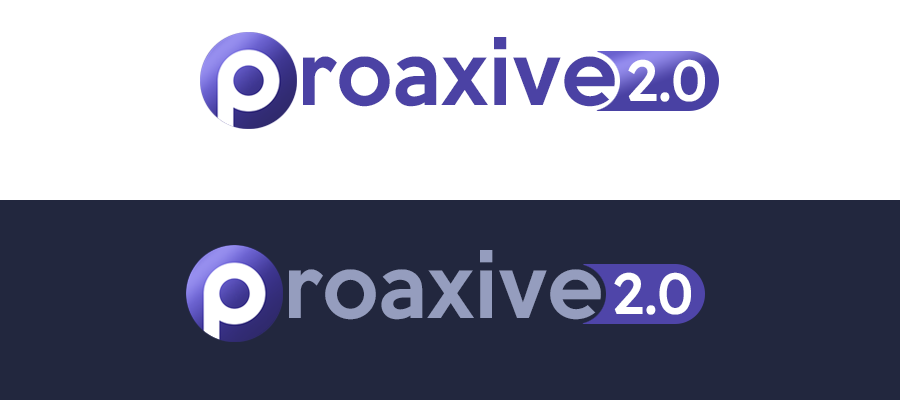
<style>
.page{position:relative;width:900px;height:400px;background:#ffffff}
.page>*{position:absolute;margin:0}
.t1{font:82px "KeepCalm-Medium";color:#4b42a4}
.t2{font:58px "Lexend-Medium";color:#ffffff}
.t3{font:82px "KeepCalm-Medium";color:#959dbe}
</style>
<div class="page">
<p class="t1" style="left:250px;top:37px;width:365px;height:89px">proaxive</p>
<p class="t2" style="left:628px;top:59px;width:77px;height:43px">2.0</p>
<p class="t3" style="left:236px;top:250px;width:365px;height:89px">proaxive</p>
<p class="t2" style="left:614px;top:272px;width:77px;height:43px">2.0</p>
</div>
